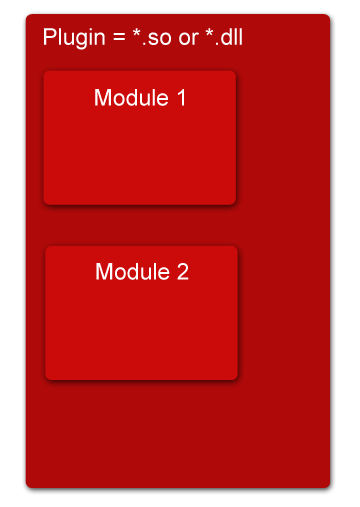
<style>
.page{position:relative;width:360px;height:507px;background:#b00909}
.page>*{position:absolute;margin:0}
.t1{font:23px "ArialMT";color:#fefefe}
.t2{font:23px "ArialMT";color:#ffffff}
</style>
<div class="page">
<p class="t1" style="left:44px;top:28px;width:198px;height:22px">Plugin = *.so or *.dll</p>
<p class="t2" style="left:95px;top:89px;width:89px;height:17px">Module 1</p>
<p class="t2" style="left:96px;top:263px;width:93px;height:17px">Module 2</p>
</div>
